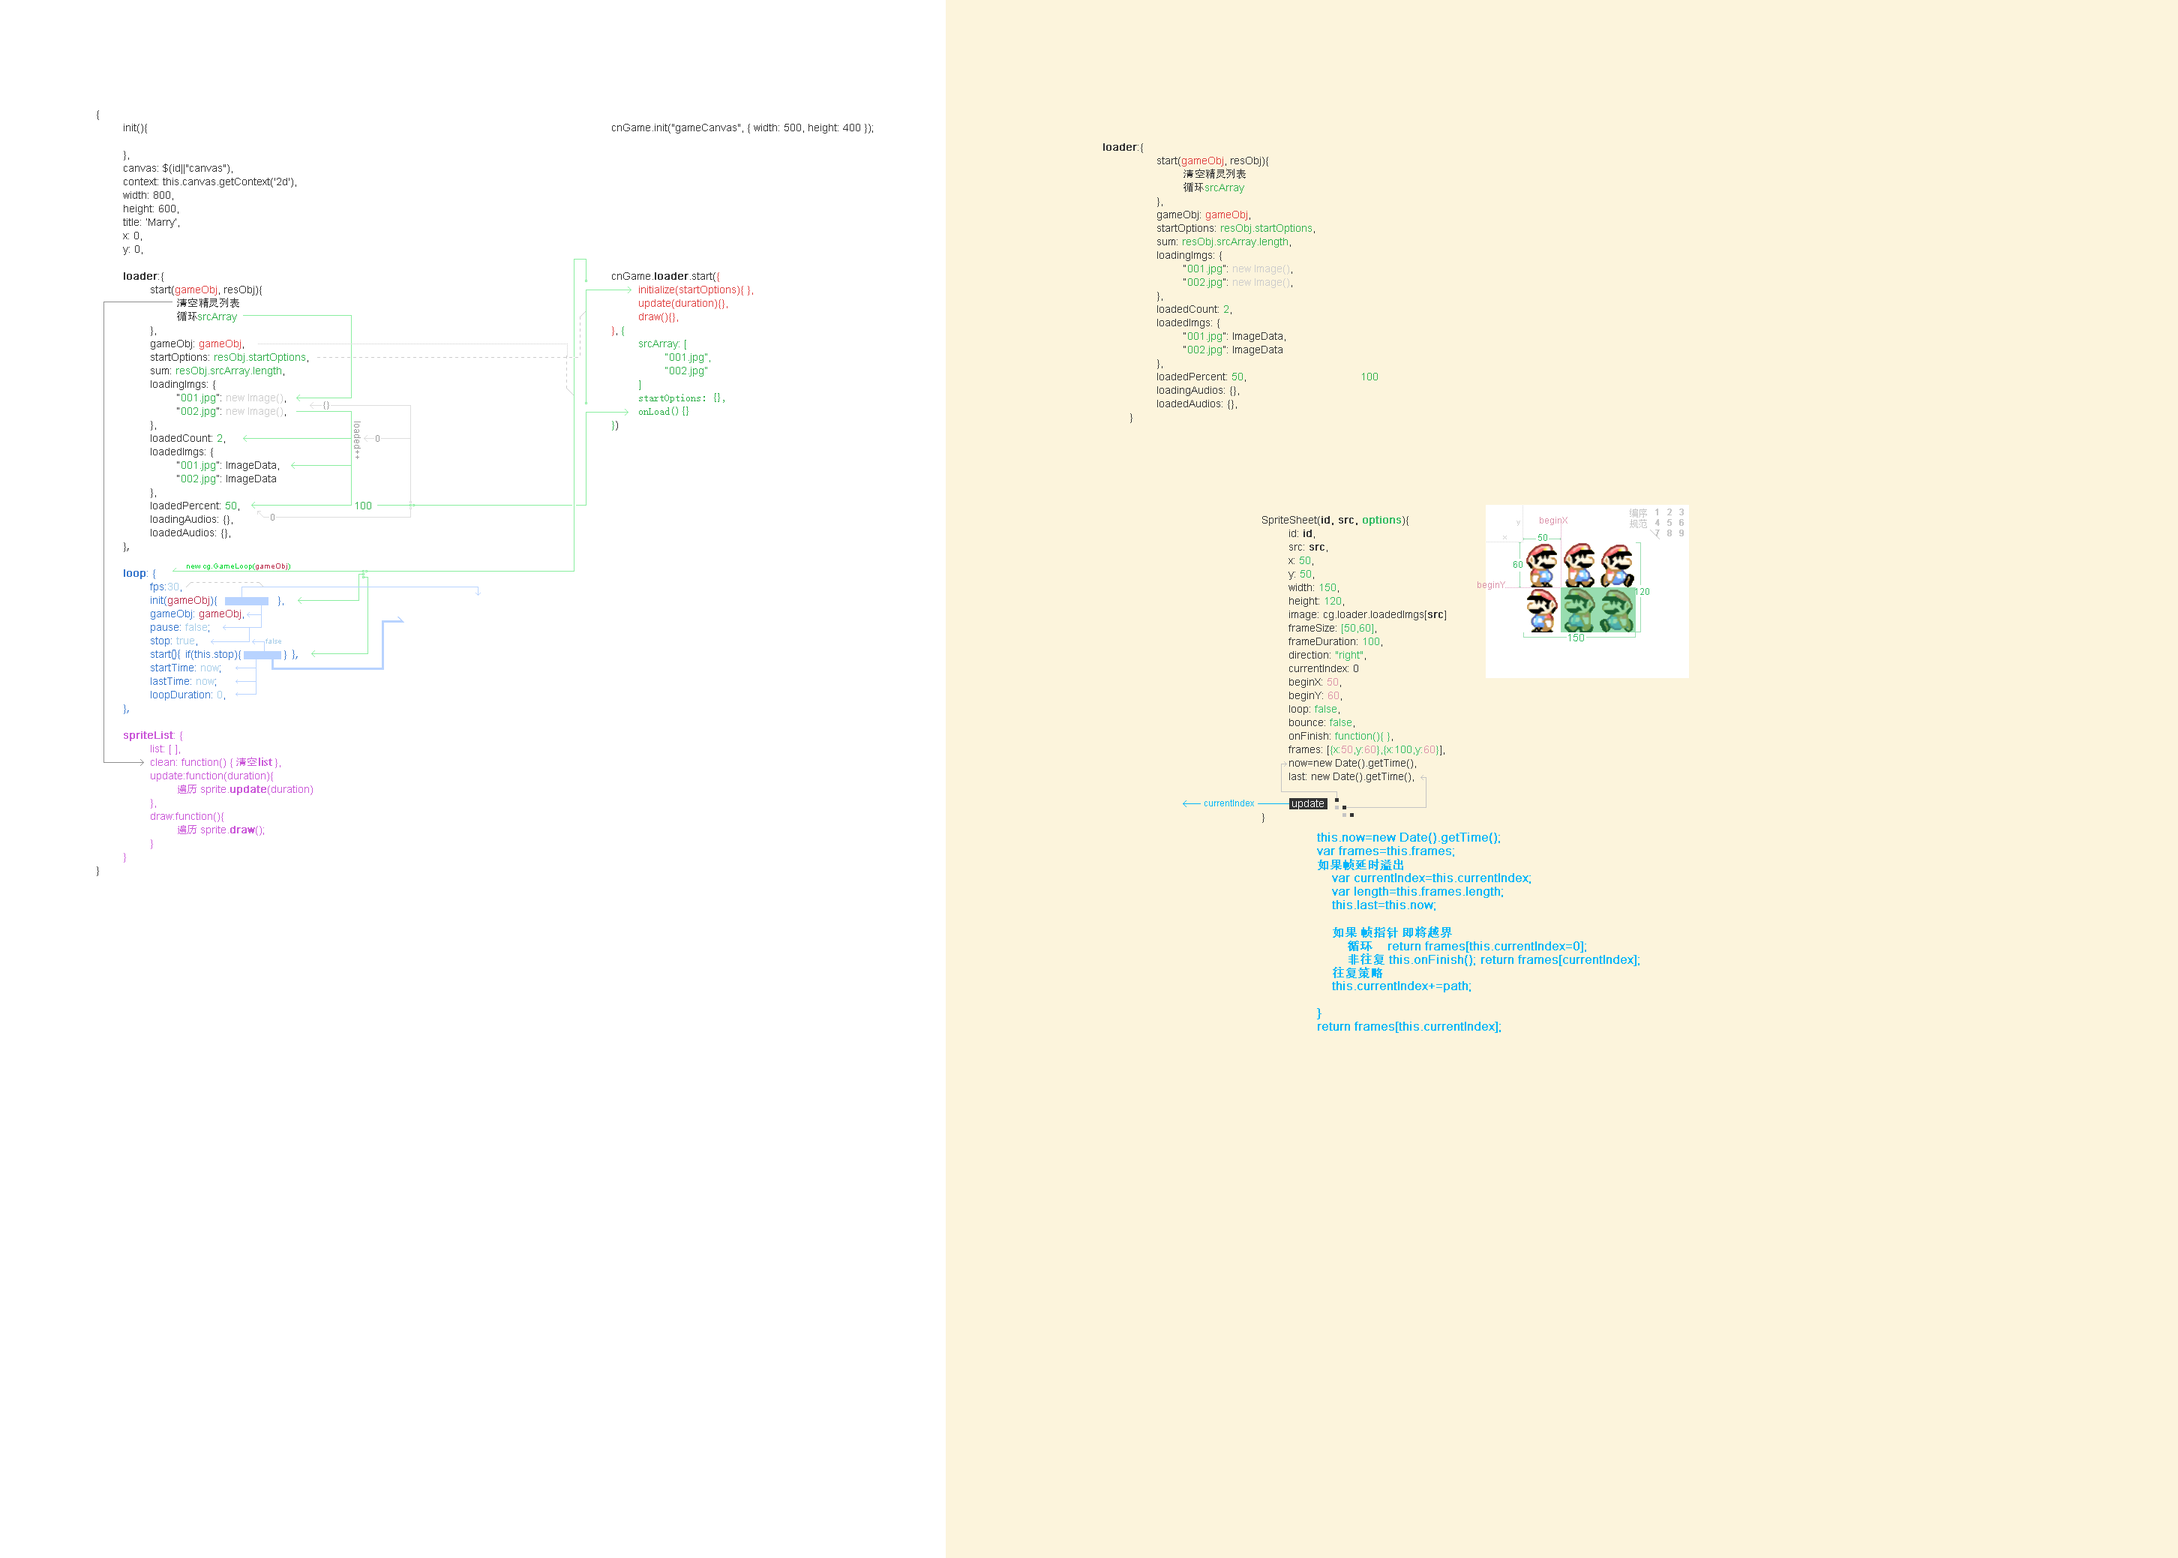
<style>
.page{position:relative;width:2178px;height:1558px;background:#fcf4dc}
.page>*{position:absolute;margin:0}
.t1{font:10.5px/13.5px "ArialMT";color:#333333}
.t2{font:10.5px/13.5px "ArialMT";color:#333333;font-weight:bold}
.t3{font:10.5px/13.5px "ArialMT";color:#df4040}
.t4{font:10.5px/13.5px "AdobeHeitiStd-Regular";color:#333333}
.t5{font:10.5px/13.5px "ArialMT";color:#2faf4a}
.t6{font:10.5px/13.5px "ArialMT";color:#cccccc}
.t7{font:10.5px/13.5px "ArialMT";color:#3575cc;font-weight:bold}
.t8{font:10.5px/13.5px "ArialMT";color:#3575cc}
.t9{font:10.5px/13.5px "ArialMT";color:#a5cce8}
.t10{font:10.5px/13.5px "ArialMT";color:#bb324f}
.t11{font:10.5px/13.5px "AdobeHeitiStd-Regular";color:#3575cc}
.t12{font:10.5px/13.5px "ArialMT";color:#ca57d8;font-weight:bold}
.t13{font:10.5px/13.5px "ArialMT";color:#ca57d8}
.t14{font:10.5px/13.5px "AdobeHeitiStd-Regular";color:#ca57d8}
.t15{font:10.5px/13.5px "SimSun";color:#2faf4a}
.t16{font:9px "ArialMT";color:#999999}
.t17{font:9px/10.5px "SimSun";color:#c4c4c4}
.t18{font:10.5px/13.5px "ArialMT";color:#32bb62;font-weight:bold}
.t19{font:10.5px/13.5px "ArialMT";color:#32bb62}
.t20{font:10.5px/13.5px "ArialMT";color:#db93aa}
.t21{font:10.5px/13.5px "ArialMT";color:#ffffff}
.t22{font:7.5px/7.5px "ArialMT";color:#cccccc}
.t23{font:7.5px/7.5px "ArialMT";color:#d5d5d5}
.t24{font:9px "ArialMT";color:#db93aa}
.t25{font:7.5px "ArialMT";color:#05da32}
.t26{font:7.5px "ArialMT";color:#bb324f}
.t27{font:7.5px "ArialMT";color:#a5cce8}
.t28{font:9px "ArialMT";color:#00b5fa}
.t29{font:12px/13.5px "ArialMT";color:#00b5fa;font-weight:bold}
.t30{font:12px/13.5px "AdobeHeitiStd-Regular";color:#00b5fa;font-weight:bold}
</style>
<div class="page">
<p class="t1" style="left:97px;top:110px;width:274px;height:766px">{<br> init(){<br><br> },<br> canvas: $(id||"canvas"),<br> context: this.canvas.getContext('2d'),<br> width: 800,<br> height: 600,<br> title: ‘Marry’,<br> x: 0,<br> y: 0,<br><br> <span class="t2">loader</span>:{<br>  start(<span class="t3">gameObj</span>, resObj){<br>   <span class="t4">清空精灵列表<br>   循环</span><span class="t5">srcArray<br></span>  },<br>  gameObj: <span class="t3">gameObj</span>,<br>  startOptions: <span class="t5">resObj.startOptions</span>,<br>  sum: <span class="t5">resObj.srcArray.length</span>, <br>  loadingImgs: {<br>   “<span class="t5">001.jpg</span>”: <span class="t6">new Image()</span>,<br>   “<span class="t5">002.jpg</span>”: <span class="t6">new Image()</span>,<br>  }, <br>  loadedCount: <span class="t5">2</span>, <br>  loadedImgs: {<br>   “<span class="t5">001.jpg</span>”: ImageData,<br>   “<span class="t5">002.jpg</span>”: ImageData<br>  }, <br>  loadedPercent: <span class="t5">50</span>,                                      <span class="t5">100<br></span>  loadingAudios: {}, <br>  loadedAudios: {},<br> }<span class="t4">,<br><br> </span><span class="t7">loop</span><span class="t8">: {<br>  fps:</span><span class="t9">30</span><span class="t8">,<br>  init(</span><span class="t10">gameObj</span><span class="t8">){                    },<br>  gameObj: </span><span class="t10">gameObj</span><span class="t8">,<br>  pause: </span><span class="t9">false</span><span class="t8">; <br>  stop: </span><span class="t9">true</span><span class="t8">,<br>  start</span><span class="t11">(){  </span><span class="t8">if(this.stop){              }</span><span class="t11">  },<br></span><span class="t8">  startTime: </span><span class="t9">now</span><span class="t8">; <br>  lastTime: </span><span class="t9">now</span><span class="t8">; <br>  loopDuration: </span><span class="t9">0</span><span class="t8">, <br> }</span><span class="t11">,<br><br> </span><span class="t12">spriteList</span><span class="t13">: {<br>  list: [ ],<br>  clean: function() { </span><span class="t14">清空list </span><span class="t13">},<br>  update:function(duration){<br>   </span><span class="t14">遍历 </span><span class="t13">sprite.</span><span class="t12">update</span><span class="t13">(duration)<br>  },<br>  draw:function(){<br>   </span><span class="t14">遍历 </span><span class="t13">sprite.</span><span class="t12">draw</span><span class="t13">();    <br>  }<br> }<br></span>}</p>
<p class="t1" style="left:612px;top:124px;width:261px;height:306px">cnGame.init("gameCanvas", { width: 500, height: 400 });<br><br><br><br><br><br><br><br><br><br><br>cnGame.<span class="t2">loader</span>.start(<span class="t3">{<br> initialize(startOptions){ },<br> update(duration){},<br> draw(){},<br>}</span>, <span class="t5">{<br> srcArray: [<br>  “001.jpg”,<br>  “002.jpg”<br> ]<br></span><span class="t15"> startOptions: {},<br> onLoad(){}<br></span><span class="t5">}</span>)</p>
<p class="t1" style="left:1103px;top:143px;width:275px;height:280px"><span class="t2">loader</span>:{<br>  start(<span class="t3">gameObj</span>, resObj){<br>   <span class="t4">清空精灵列表<br>   循环</span><span class="t5">srcArray<br></span>  },<br>  gameObj: <span class="t3">gameObj</span>,<br>  startOptions: <span class="t5">resObj.startOptions</span>,<br>  sum: <span class="t5">resObj.srcArray.length</span>, <br>  loadingImgs: {<br>   “<span class="t5">001.jpg</span>”: <span class="t6">new Image()</span>,<br>   “<span class="t5">002.jpg</span>”: <span class="t6">new Image()</span>,<br>  }, <br>  loadedCount: <span class="t5">2</span>, <br>  loadedImgs: {<br>   “<span class="t5">001.jpg</span>”: ImageData,<br>   “<span class="t5">002.jpg</span>”: ImageData<br>  }, <br>  loadedPercent: <span class="t5">50</span>,                                      <span class="t5">100<br></span>  loadingAudios: {}, <br>  loadedAudios: {},<br> }</p>
<p class="t16" style="left:323px;top:401px;width:6px;height:9px">{}</p>
<p class="t16" style="left:354px;top:422px;width:7px;height:37px;rotate:90deg">loaded++</p>
<p class="t16" style="left:376px;top:435px;width:4px;height:7px">0</p>
<p class="t17" style="left:1630px;top:508px;width:17px;height:20px">编序<br>规范</p>
<p class="t16" style="left:271px;top:514px;width:3px;height:6px">0</p>
<p class="t1" style="left:1262px;top:516px;width:184px;height:307px">SpriteSheet(<span class="t2">id, src, </span><span class="t18">options</span>){<br> id: <span class="t2">id</span>,<br> src: <span class="t2">src</span>,<br> x: <span class="t19">50</span>,<br> y: <span class="t19">50</span>,<br> width: <span class="t19">150</span>,<br> height: <span class="t19">120</span>,<br> image: cg.loader.loadedImgs[<span class="t2">src</span>]<br> frameSize: <span class="t19">[50,60]</span>,<br> frameDuration: <span class="t19">100</span>,<br> direction: <span class="t19">"right"</span>,<br> currentIndex: 0<br> beginX: <span class="t20">50</span>,<br> beginY: <span class="t20">60</span>,<br> loop: <span class="t19">false</span>,<br> bounce: <span class="t19">false</span>,<br> onFinish: <span class="t19">function(){ }</span>,<br> frames: [<span class="t19">{x:</span><span class="t20">50</span><span class="t19">,y:</span><span class="t20">60</span><span class="t19">},{x:100,y:</span><span class="t20">60</span><span class="t19">}</span>],<br> now=new Date().getTime(),<br> last: new Date().getTime(),<br><br>  <span class="t21">update<br></span>}</p>
<p class="t22" style="left:1503px;top:520px;width:17px;height:19px"><span class="t23">      </span>y<br><br>x</p>
<p class="t24" style="left:1540px;top:517px;width:28px;height:8px">beginX</p>
<p class="t25" style="left:187px;top:563px;width:103px;height:7px">new cg.GameLoop(<span class="t26">gameObj</span>)</p>
<p class="t24" style="left:1478px;top:581px;width:27px;height:9px">beginY</p>
<p class="t27" style="left:266px;top:638px;width:15px;height:6px">false</p>
<p class="t28" style="left:1204px;top:800px;width:50px;height:6px">currentIndex</p>
<p class="t29" style="left:1317px;top:832px;width:323px;height:201px">this.now=new Date().getTime();<br>var frames=this.frames;<br><span class="t30">如果帧延时溢出<br></span>    var currentIndex=this.currentIndex;<br>    var length=this.frames.length;<br>    this.last=this.now;<br>    <br>    <span class="t30">如果 帧指针 即将越界<br>        循环</span>    return frames[this.currentIndex=0]; <br>        <span class="t30">非往复 </span>this.onFinish(); return frames[currentIndex];<br>    <span class="t30">往复策略<br></span>    this.currentIndex+=path;<br>    <br>}<br>return frames[this.currentIndex];</p>
</div>
